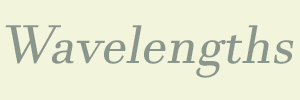
<style>
.page{position:relative;width:300px;height:100px;background:#f3f4dc}
.page>*{position:absolute;margin:0}
.t1{font:53.3px "JavaneseText";color:#8a968c;font-style:italic}
</style>
<div class="page">
<p class="t1" style="left:5px;top:25px;width:289px;height:53px">Wavelengths</p>
</div>
